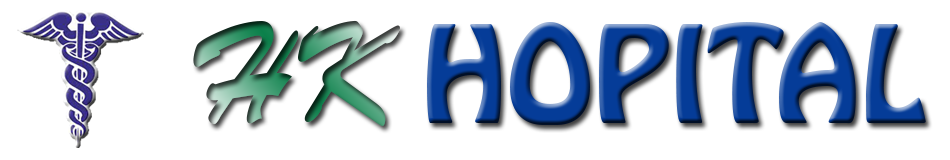
<style>
.page{position:relative;width:950px;height:160px;background:#ffffff}
.page>*{position:absolute;margin:0}
.t1{font:144.1px "BrushScriptStd";scale:0.8 1}
.t2{font:118.6px "HoboStd";color:#053c98}
</style>
<div class="page">
<p class="t1" style="left:193px;top:20px;width:207px;height:106px">HK</p>
<p class="t2" style="left:427px;top:22px;width:499px;height:103px">HOPITAL</p>
</div>
